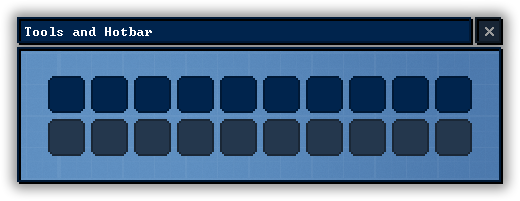
<style>
.page{position:relative;width:520px;height:201px}
.page>*{position:absolute;margin:0}
.t1{font:12px "Terminal";color:#ffffff}
.t2{font:16px "Terminal";color:#9a9a9a}
</style>
<div class="page">
<p class="t1" style="left:25px;top:27px;width:127px;height:9px">Tools and Hotbar</p>
<p class="t1" style="left:25px;top:27px;width:127px;height:9px">Tools and Hotbar</p>
<p class="t2" style="left:485px;top:27px;width:9px;height:9px">x</p>
<p class="t2" style="left:485px;top:27px;width:9px;height:9px">x</p>
</div>
